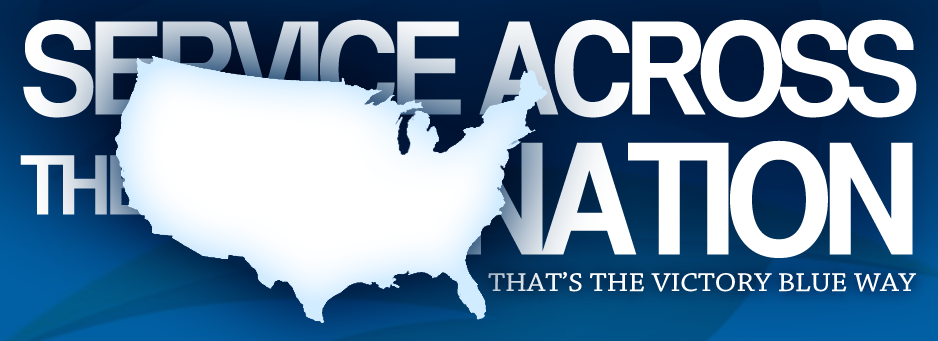
<style>
.page{position:relative;width:938px;height:341px}
.page>*{position:absolute;margin:0}
.t1{font:127.4px/120px "HelveticaCYBold";letter-spacing:-0.075em;color:#ffffff;text-transform:uppercase;scale:1.11 1}
.t2{font:81px/140px "HelveticaCYBold";letter-spacing:-0.075em;color:#ffffff;text-transform:uppercase;scale:1.11 1}
.t3{font:153px/140px "HelveticaCYBold";letter-spacing:-0.075em;color:#ffffff;text-transform:uppercase;scale:1.11 1}
.t4{font:27px "ChaparralPro-Regular";color:#ffffff;text-transform:uppercase;scale:1.11 1}
</style>
<div class="page">
<p class="t1" style="left:20px;top:19px;width:897px;height:239px">SERVICE ACROSS<br><span class="t2">THE              </span><span class="t3">NATION</span></p>
<p class="t4" style="left:488px;top:272px;width:428px;height:20px">That’s the Victory Blue way</p>
</div>
